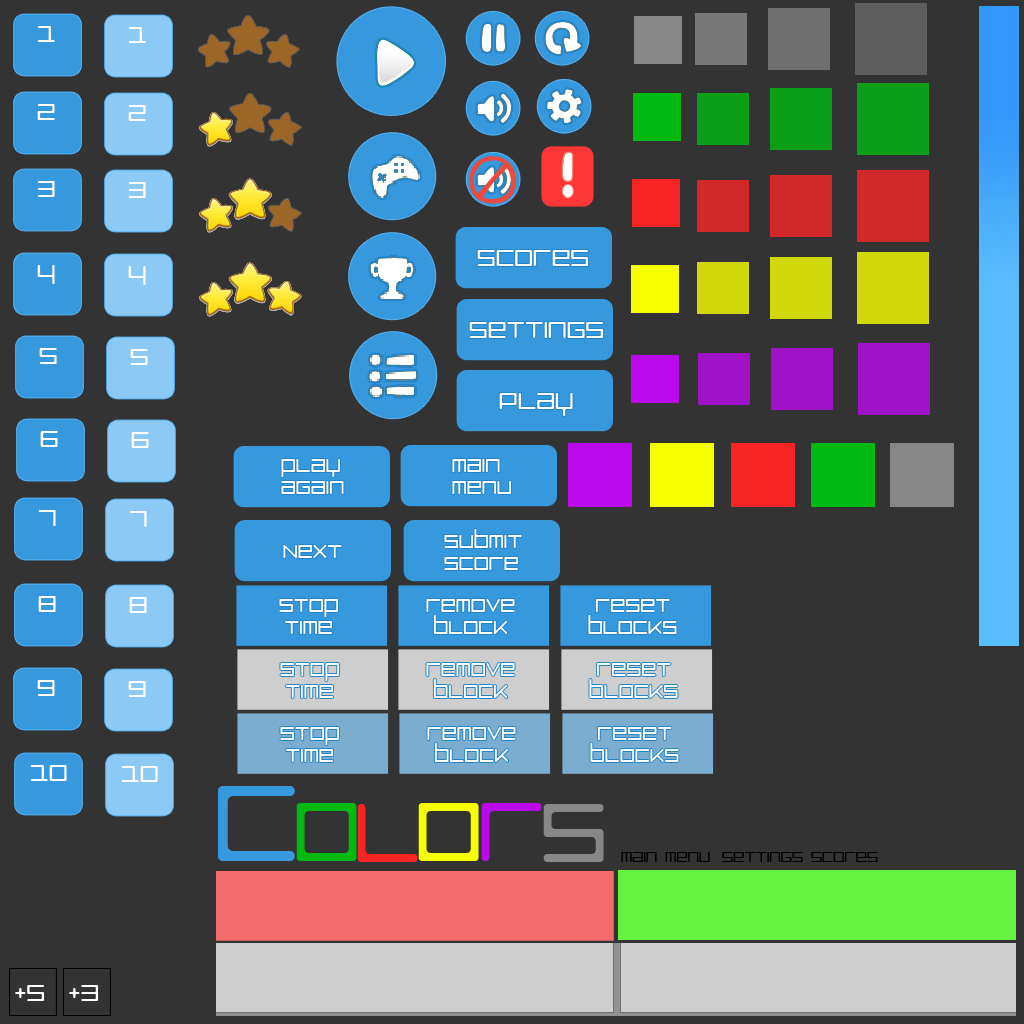
<style>
.page{position:relative;width:1024px;height:1024px;background:#333333}
.page>*{position:absolute;margin:0}
.t1{font:30px "LuggageRoundLight";letter-spacing:-0.02em;color:#fefefe}
.t2{font:30px "LuggageRoundLight";letter-spacing:-0.02em;color:#ffffff}
.t3{font:24px/22px "LuggageRoundLight";letter-spacing:-0.02em;color:#ffffff}
.t4{font:24px "LuggageRoundLight";letter-spacing:-0.02em;color:#ffffff}
.t5{font:137.7px "LuggageRoundLight";letter-spacing:-0.02em;color:#3698dd}
.t6{font:107.4px "LuggageRoundLight";letter-spacing:-0.02em;color:#00b911}
.t7{font:107.4px "LuggageRoundLight";letter-spacing:-0.02em;color:#f72525}
.t8{font:107.4px "LuggageRoundLight";letter-spacing:-0.02em;color:#f6ff00}
.t9{font:107.4px "LuggageRoundLight";letter-spacing:-0.02em;color:#b909eb}
.t10{font:107.4px "LuggageRoundLight";letter-spacing:-0.02em;color:#878787}
.t11{font:18px "LuggageRoundLight";letter-spacing:-0.02em;color:#000000}
</style>
<div class="page">
<p class="t1" style="left:37px;top:26px;width:18px;height:16px">1</p>
<p class="t1" style="left:128px;top:27px;width:18px;height:16px">1</p>
<p class="t1" style="left:37px;top:104px;width:18px;height:16px">2</p>
<p class="t1" style="left:128px;top:105px;width:18px;height:16px">2</p>
<p class="t1" style="left:37px;top:181px;width:18px;height:16px">3</p>
<p class="t1" style="left:128px;top:182px;width:18px;height:16px">3</p>
<p class="t2" style="left:477px;top:250px;width:112px;height:16px">scores</p>
<p class="t1" style="left:37px;top:265px;width:18px;height:19px">4</p>
<p class="t1" style="left:128px;top:266px;width:18px;height:19px">4</p>
<p class="t2" style="left:469px;top:322px;width:135px;height:16px">settings</p>
<p class="t1" style="left:39px;top:348px;width:18px;height:16px">5</p>
<p class="t1" style="left:130px;top:349px;width:18px;height:16px">5</p>
<p class="t2" style="left:499px;top:393px;width:74px;height:23px">Play</p>
<p class="t1" style="left:40px;top:431px;width:18px;height:16px">6</p>
<p class="t1" style="left:131px;top:432px;width:18px;height:16px">6</p>
<p class="t3" style="left:281px;top:459px;width:63px;height:35px">play<br>again</p>
<p class="t3" style="left:452px;top:459px;width:59px;height:35px">Main<br>menu</p>
<p class="t1" style="left:38px;top:510px;width:18px;height:16px">7</p>
<p class="t1" style="left:129px;top:511px;width:18px;height:16px">7</p>
<p class="t3" style="left:444px;top:529px;width:78px;height:41px">submit<br>score</p>
<p class="t4" style="left:283px;top:545px;width:59px;height:13px">Next</p>
<p class="t1" style="left:38px;top:596px;width:18px;height:16px">8</p>
<p class="t1" style="left:129px;top:597px;width:18px;height:16px">8</p>
<p class="t3" style="left:279px;top:599px;width:59px;height:35px;text-align:center">stop<br>time</p>
<p class="t3" style="left:426px;top:599px;width:89px;height:35px;text-align:center">remove<br>block</p>
<p class="t3" style="left:588px;top:599px;width:89px;height:35px;text-align:center">reset<br>blocks</p>
<p class="t3" style="left:280px;top:663px;width:59px;height:35px;text-align:center">stop<br>time</p>
<p class="t3" style="left:426px;top:663px;width:89px;height:35px;text-align:center">remove<br>block</p>
<p class="t3" style="left:589px;top:663px;width:89px;height:35px;text-align:center">reset<br>blocks</p>
<p class="t1" style="left:37px;top:680px;width:18px;height:16px">9</p>
<p class="t1" style="left:128px;top:681px;width:18px;height:16px">9</p>
<p class="t3" style="left:280px;top:727px;width:59px;height:35px;text-align:center">stop<br>time</p>
<p class="t3" style="left:427px;top:727px;width:89px;height:35px;text-align:center">remove<br>block</p>
<p class="t3" style="left:590px;top:727px;width:89px;height:35px;text-align:center">reset<br>blocks</p>
<p class="t1" style="left:30px;top:765px;width:37px;height:16px">10</p>
<p class="t1" style="left:121px;top:766px;width:37px;height:16px">10</p>
<p class="t5" style="left:218px;top:786px;width:77px;height:75px">c</p>
<p class="t6" style="left:296px;top:803px;width:61px;height:58px">o</p>
<p class="t7" style="left:357px;top:804px;width:61px;height:58px">l</p>
<p class="t8" style="left:418px;top:803px;width:61px;height:58px">o</p>
<p class="t9" style="left:481px;top:803px;width:61px;height:58px">r</p>
<p class="t10" style="left:543px;top:804px;width:61px;height:58px">s</p>
<p class="t11" style="left:621px;top:852px;width:89px;height:10px">main menu</p>
<p class="t11" style="left:722px;top:852px;width:81px;height:10px">settings</p>
<p class="t11" style="left:811px;top:852px;width:67px;height:10px">scores</p>
<p class="t2" style="left:15px;top:985px;width:30px;height:16px">+5</p>
<p class="t2" style="left:69px;top:985px;width:30px;height:16px">+3</p>
</div>
